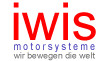
<style>
.page{position:relative;width:105px;height:61px;background:#ffffff}
.page>*{position:absolute;margin:0}
.t1{font:52.3px "ArialMT";color:#ff0000}
.t2{font:8.7px "ArialMT";color:#696969}
.t3{font:10.5px "ArialMT";scale:0.83 1}
</style>
<div class="page">
<p class="t1" style="left:13px;top:2px;width:83px;height:39px">iwis</p>
<p class="t2" style="left:13px;top:52px;width:82px;height:9px">wir bewegen die welt</p>
<p class="t3" style="left:14px;top:42px;width:81px;height:10px">m o t o r s y s t e m e</p>
</div>
